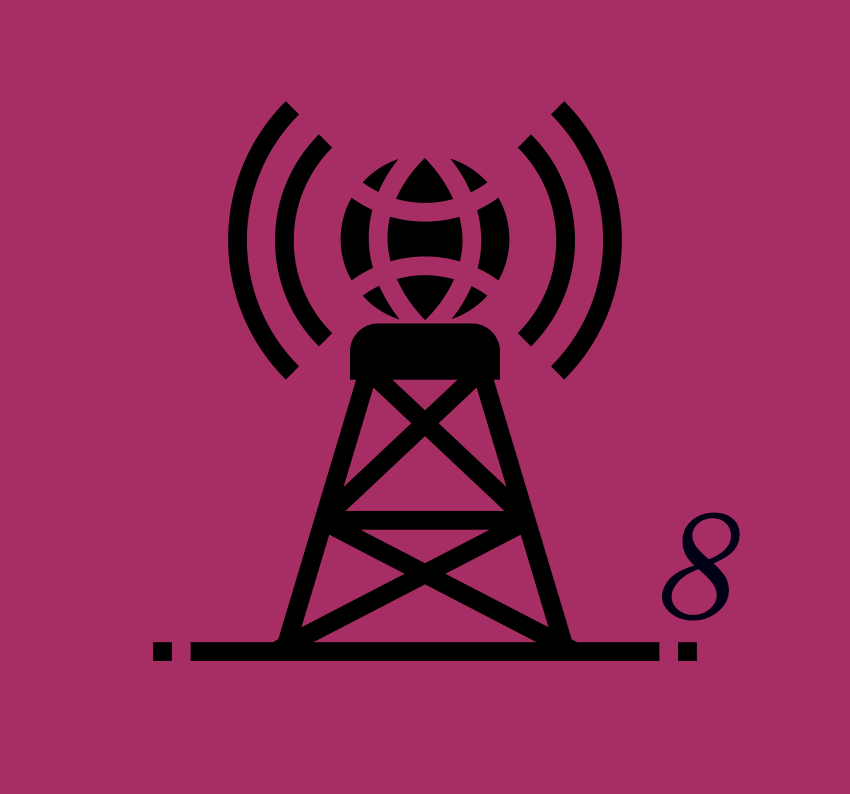
<style>
.page{position:relative;width:850px;height:794px;background:#a72e64}
.page>*{position:absolute;margin:0}
.t1{font:152.9px "CenturySchoolbook-Italic";color:#000116}
</style>
<div class="page">
<p class="t1" style="left:662px;top:512px;width:78px;height:109px">8</p>
</div>
